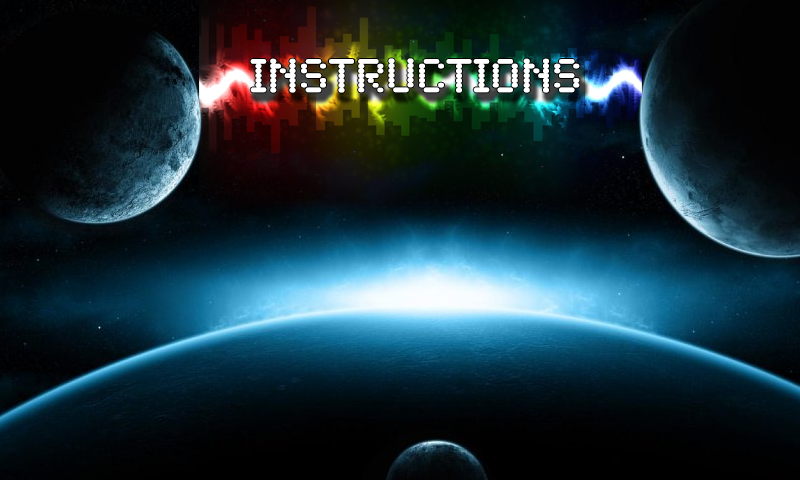
<style>
.page{position:relative;width:800px;height:480px}
.page>*{position:absolute;margin:0}
.t1{font:50px "SynchroLET";color:#ffffff}
</style>
<div class="page">
<p class="t1" style="left:250px;top:58px;width:330px;height:35px">INSTRUCTIONS</p>
</div>
